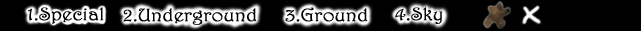
<style>
.page{position:relative;width:641px;height:31px;background:#000000}
.page>*{position:absolute;margin:0}
.t1{font:18px "Harrington";color:#000000;font-weight:bold;scale:1.08 1}
</style>
<div class="page">
<p class="t1" style="left:28px;top:7px;width:76px;height:17px">1.Special</p>
<p class="t1" style="left:123px;top:8px;width:134px;height:17px">2.Underground</p>
<p class="t1" style="left:285px;top:7px;width:83px;height:15px">3.Ground</p>
<p class="t1" style="left:395px;top:7px;width:48px;height:17px">4.Sky</p>
</div>
